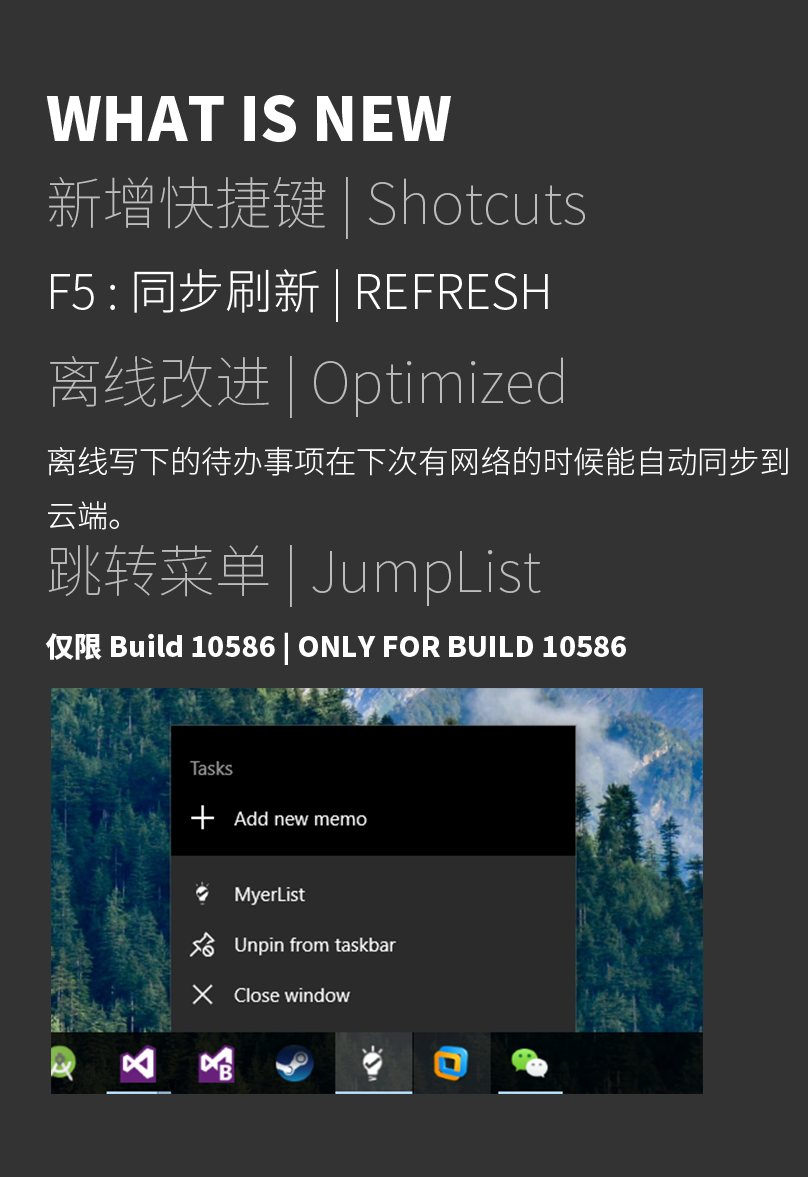
<style>
.page{position:relative;width:808px;height:1177px;background:#333333}
.page>*{position:absolute;margin:0}
.t1{font:59.9px "SourceHanSansCN-Heavy";color:#ffffff}
.t2{font:56.4px "SourceHanSansCN-ExtraLight";color:#bcbcbc}
.t3{font:47.6px "SourceHanSansCN-Light";color:#ffffff}
.t4{font:31px "SourceHanSansCN-Light";color:#ffffff}
.t5{font:28.2px "SourceHanSansCN-Heavy";color:#ffffff}
</style>
<div class="page">
<p class="t1" style="left:46px;top:95px;width:405px;height:47px">WHAT IS NEW</p>
<p class="t2" style="left:49px;top:176px;width:536px;height:63px">新增快捷键 | Shotcuts</p>
<p class="t3" style="left:51px;top:269px;width:497px;height:53px">F5 : 同步刷新 | REFRESH</p>
<p class="t2" style="left:50px;top:356px;width:513px;height:62px">离线改进 | Optimized</p>
<p class="t4" style="left:47px;top:446px;width:741px;height:84px">离线写下的待办事项在下次有网络的时候能自动同步到<br>云端。</p>
<p class="t2" style="left:48px;top:545px;width:493px;height:62px">跳转菜单 | JumpList</p>
<p class="t5" style="left:45px;top:632px;width:581px;height:33px">仅限 Build 10586 | ONLY FOR BUILD 10586</p>
</div>
